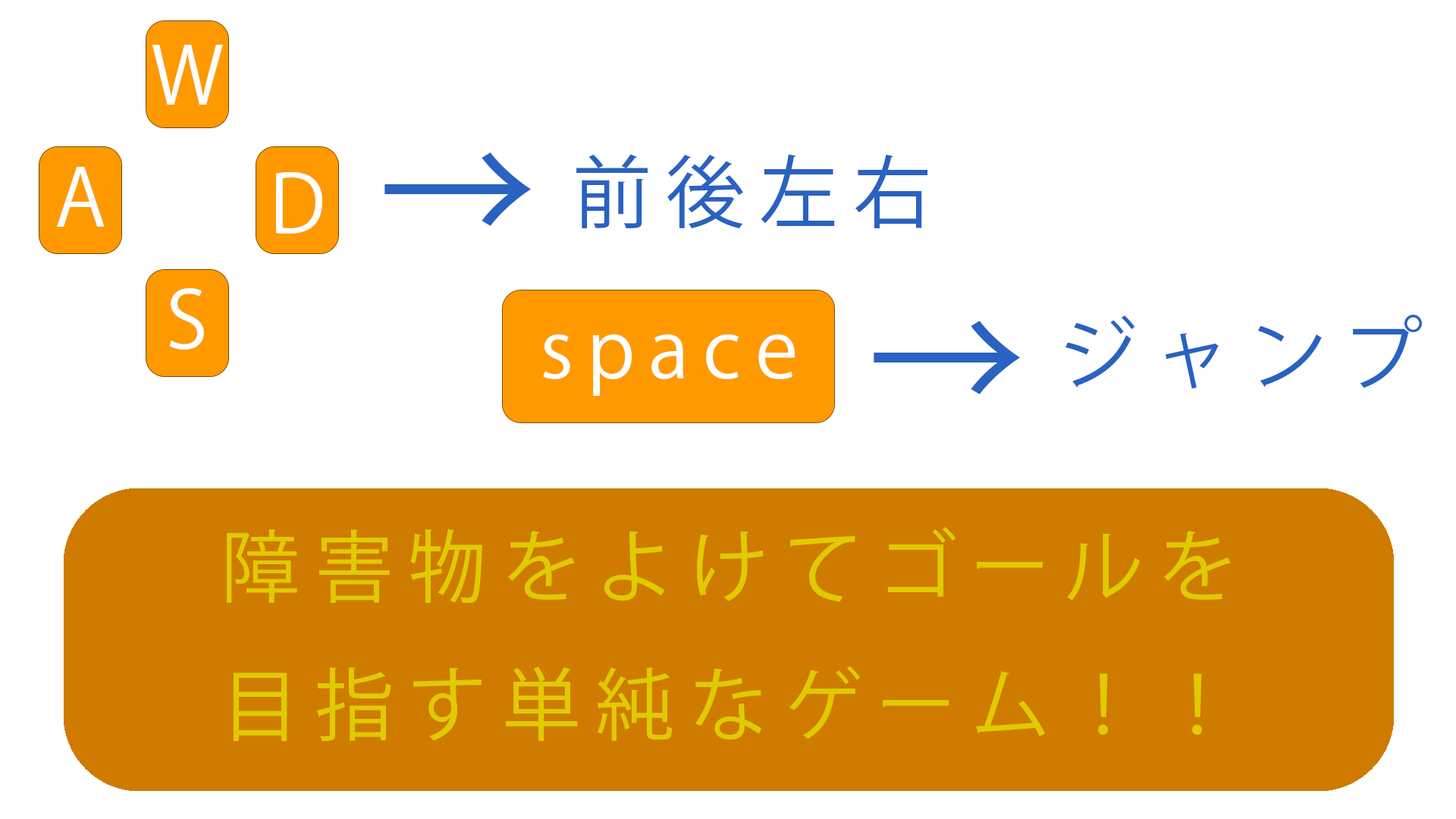
<style>
.page{position:relative;width:1456px;height:819px;background:#ffffff}
.page>*{position:absolute;margin:0}
.t1{font:79px "KozGoPr6N-Regular";letter-spacing:0.2em;color:#ffffff}
.t2{font:158px "KozGoPr6N-Regular";letter-spacing:0.2em;color:#2962c0}
.t3{font:79px "KozGoPr6N-Regular";letter-spacing:0.2em;color:#2962c0}
.t4{font:79px "KozGoPr6N-Regular";letter-spacing:0.2em;color:#e0ca00}
</style>
<div class="page">
<p class="t1" style="left:152px;top:44px;width:71px;height:61px">W</p>
<p class="t2" style="left:384px;top:152px;width:148px;height:74px">→</p>
<p class="t3" style="left:576px;top:154px;width:352px;height:75px">前後左右</p>
<p class="t1" style="left:57px;top:166px;width:48px;height:61px">A</p>
<p class="t1" style="left:276px;top:172px;width:46px;height:62px">D</p>
<p class="t1" style="left:169px;top:288px;width:35px;height:62px">S</p>
<p class="t3" style="left:1065px;top:315px;width:357px;height:74px">ジャンプ</p>
<p class="t2" style="left:874px;top:321px;width:147px;height:73px">→</p>
<p class="t1" style="left:543px;top:334px;width:252px;height:62px">space</p>
<p class="t4" style="left:227px;top:526px;width:1004px;height:216px;text-align:center">障害物をよけてゴールを<br>目指す単純なゲーム！！</p>
</div>
